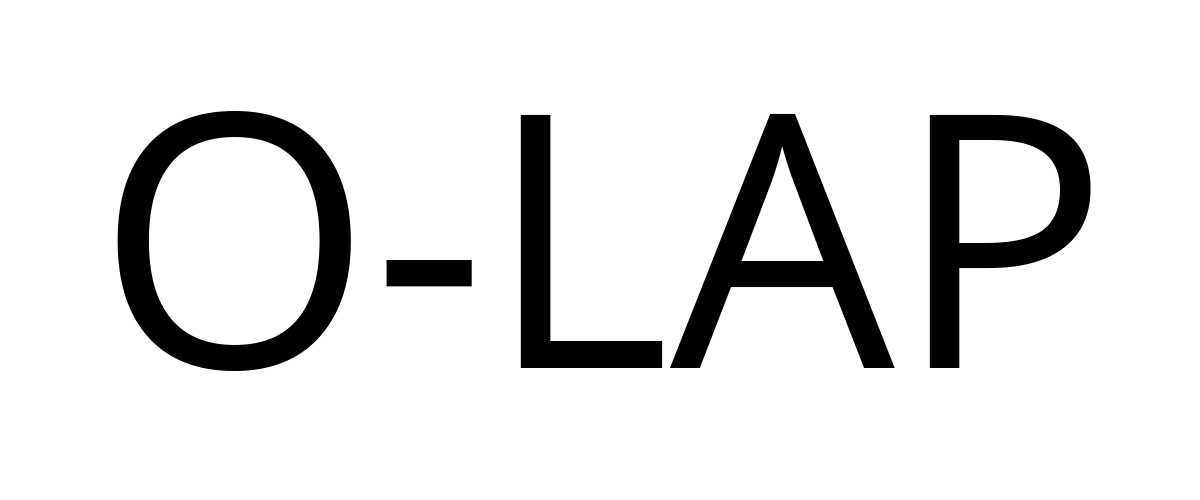
<style>
.page{position:relative;width:1200px;height:500px;background:#ffffff}
.page>*{position:absolute;margin:0}
.t1{font:354.6px "OpenSans";color:#000000}
</style>
<div class="page">
<p class="t1" style="left:117px;top:110px;width:974px;height:261px">O-LAP</p>
</div>
